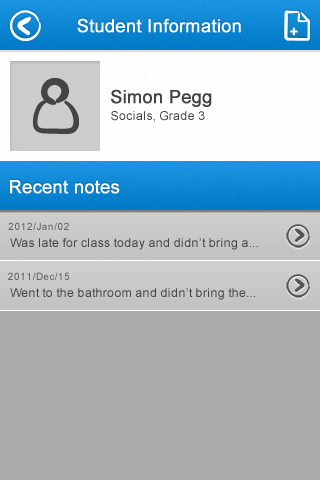
<style>
.page{position:relative;width:320px;height:480px;background:#aaaaaa}
.page>*{position:absolute;margin:0}
.t1{font:18px "ArialMT";letter-spacing:0.025em;color:#ffffff;font-weight:bold}
.t2{font:18px "ComicSansMS";letter-spacing:0.025em;color:#fefefe;font-weight:bold}
.t3{font:18px "ArialMT";letter-spacing:0.025em;color:#444444;font-weight:bold}
.t4{font:12px "ArialMT";letter-spacing:0.025em;color:#444444}
.t5{font:18px "ArialMT";letter-spacing:0.025em;color:#fdfbfc;font-weight:bold}
.t6{font:10px "ArialMT";letter-spacing:0.025em;color:#666666}
</style>
<div class="page">
<p class="t1" style="left:77px;top:18px;width:164px;height:15px">Student Information</p>
<p class="t2" style="left:290px;top:27px;width:8px;height:9px">+</p>
<p class="t3" style="left:111px;top:89px;width:101px;height:18px">Simon Pegg</p>
<p class="t4" style="left:111px;top:111px;width:94px;height:11px">Socials, Grade 3</p>
<p class="t5" style="left:10px;top:180px;width:110px;height:14px">Recent notes</p>
<p class="t6" style="left:8px;top:222px;width:61px;height:8px">2012/Jan/02</p>
<p class="t4" style="left:10px;top:238px;width:248px;height:12px">Was late for class today and didn’t bring a...</p>
<p class="t6" style="left:8px;top:272px;width:62px;height:8px">2011/Dec/15</p>
<p class="t4" style="left:10px;top:288px;width:245px;height:12px">Went to the bathroom and didn’t bring the...</p>
</div>
